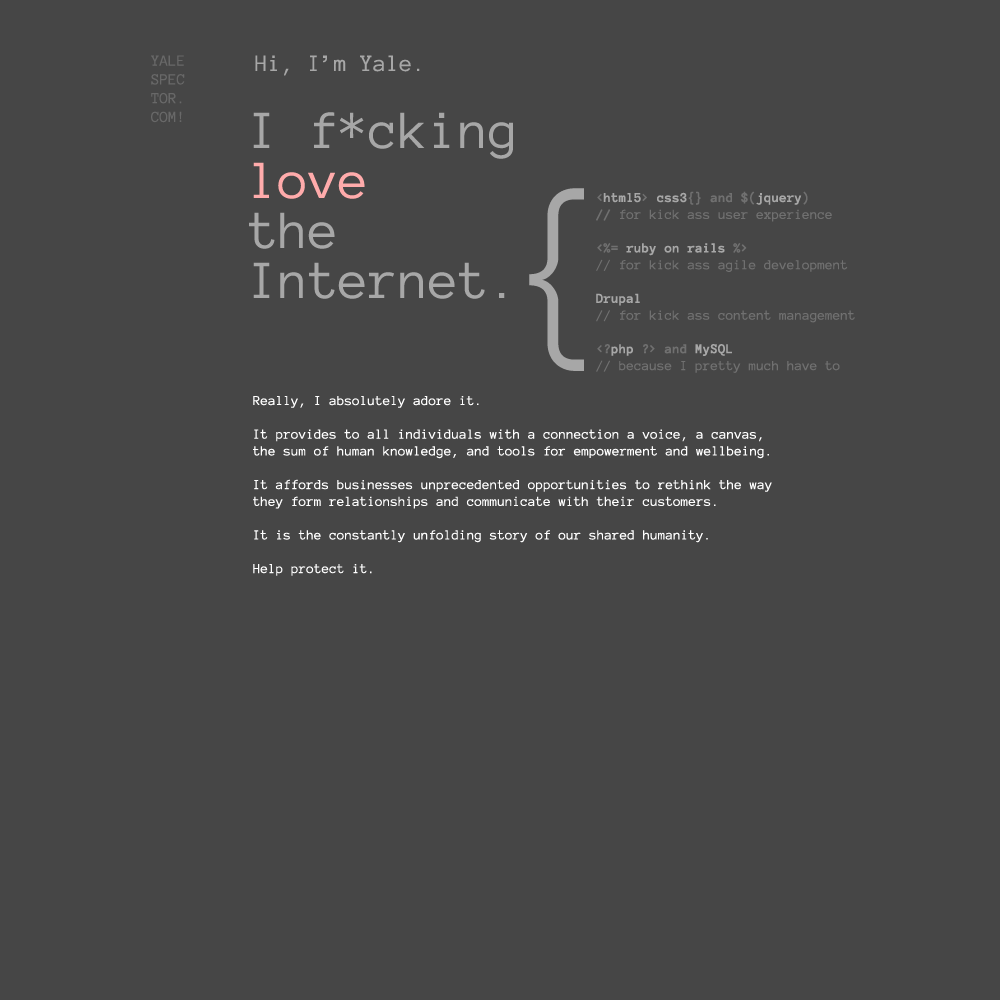
<style>
.page{position:relative;width:1000px;height:1000px;background:#464646}
.page>*{position:absolute;margin:0}
.t1{font:15.7px "AnonymousPro";color:#686868;text-transform:uppercase}
.t2{font:24px "AnonymousPro";color:#a7a7a7}
.t3{font:55px/50px "AnonymousPro";color:#a7a7a7}
.t4{font:55px/50px "AnonymousPro";color:#ffabab}
.t5{font:200.3px "AnonymousPro";color:#a7a7a7}
.t6{font:14px "AnonymousPro";color:#707070}
.t7{font:14px "AnonymousPro-Bold";color:#707070}
.t8{font:14px "AnonymousPro-Bold";color:#a7a7a7}
.t9{font:14px "AnonymousPro";color:#ffffff}
</style>
<div class="page">
<p class="t1" style="left:151px;top:55px;width:34px;height:68px">yale<br>spec<br>tor.<br>com!</p>
<p class="t2" style="left:255px;top:55px;width:165px;height:21px">Hi, I’m Yale.</p>
<p class="t3" style="left:249px;top:112px;width:264px;height:187px">I f*cking<br><span class="t4">love<br></span>the<br>Internet.</p>
<p class="t5" style="left:529px;top:188px;width:55px;height:183px">{</p>
<p class="t6" style="left:596px;top:191px;width:259px;height:182px"><span class="t7">&lt;</span><span class="t8">html5</span><span class="t7">&gt; </span><span class="t8">css3</span><span class="t7">{} and $(</span><span class="t8">jquery</span><span class="t7">)<br>// </span>for kick ass user experience<br><br><span class="t7">&lt;%= </span><span class="t8">ruby on rails</span><span class="t7"> %&gt;<br></span>// for kick ass agile development<br><br><span class="t8">Drupal<br></span>// for kick ass content management<br><br><span class="t7">&lt;?</span><span class="t8">php</span><span class="t7"> ?&gt; and </span><span class="t8">MySQL<br></span>// because I pretty much have to</p>
<p class="t9" style="left:253px;top:396px;width:519px;height:180px">Really, I absolutely adore it.<br><br>It provides to all individuals with a connection a voice, a canvas,<br>the sum of human knowledge, and tools for empowerment and wellbeing.<br><br>It affords businesses unprecedented opportunities to rethink the way<br>they form relationships and communicate with their customers.<br><br>It is the constantly unfolding story of our shared humanity.<br><br>Help protect it.</p>
</div>
